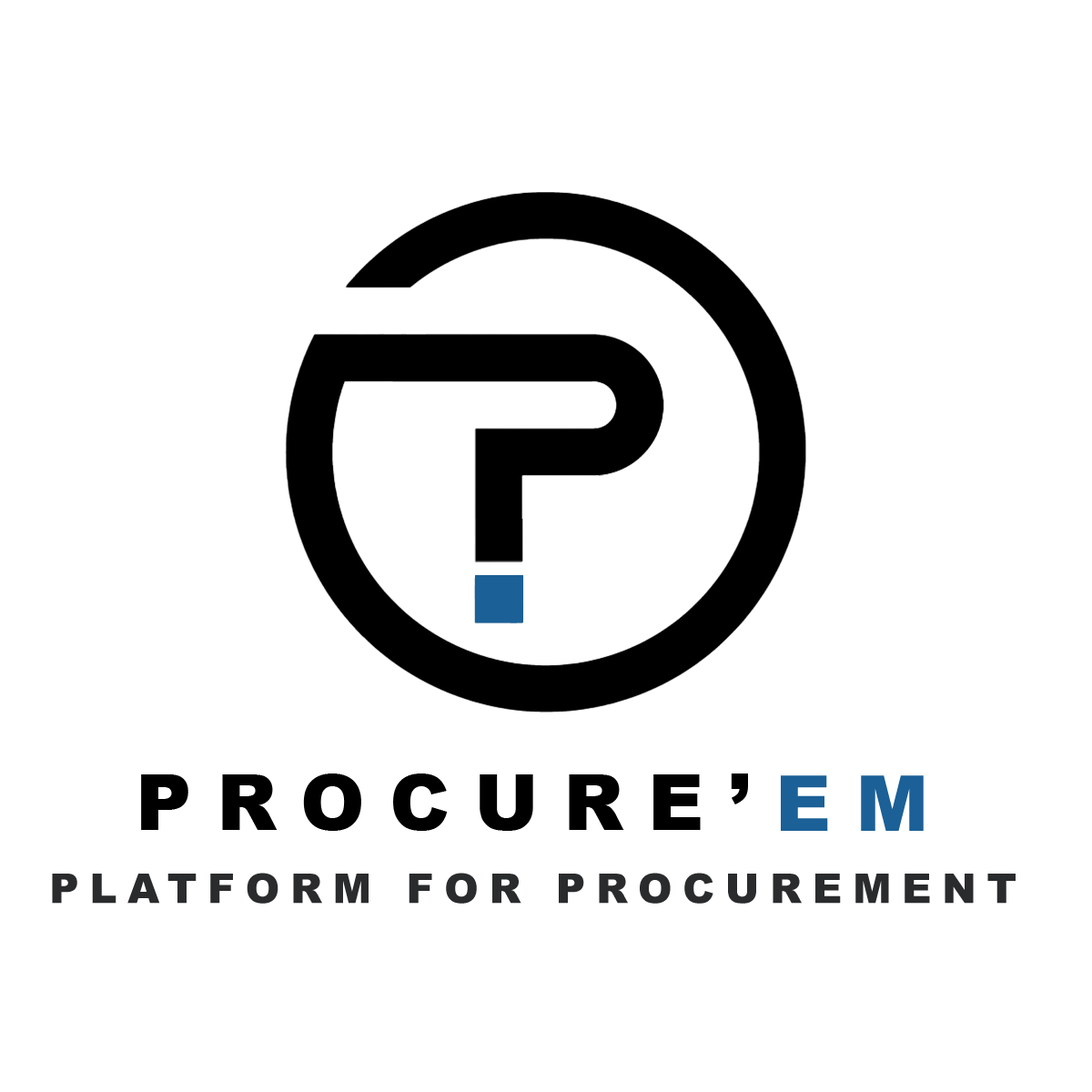
<style>
.page{position:relative;width:1092px;height:1092px;background:#ffffff}
.page>*{position:absolute;margin:0}
.t1{font:77.3px "Arial-Black";letter-spacing:0.32em;color:#000000}
.t2{font:77.3px "Arial-Black";letter-spacing:0.32em;color:#1b6097}
.t3{font:40.9px "Arial-Black";letter-spacing:0.26em;color:#2a2b2c}
</style>
<div class="page">
<p class="t1" style="left:141px;top:773px;width:607px;height:58px">PROCURE’</p>
<p class="t2" style="left:781px;top:775px;width:143px;height:56px">EM</p>
<p class="t3" style="left:52px;top:873px;width:964px;height:31px">PLATFORM FOR PROCUREMENT</p>
</div>
